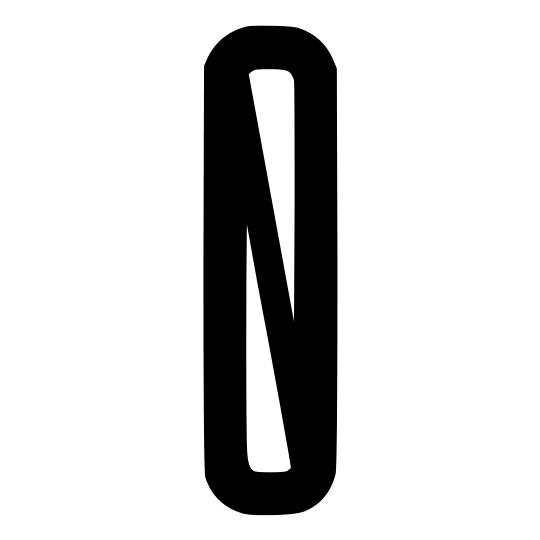
<style>
.page{position:relative;width:540px;height:540px;background:#ffffff}
.page>*{position:absolute;margin:0}
.t1{font:629.2px "DyoblogFont-Regular";letter-spacing:0.04em;color:#000000}
</style>
<div class="page">
<p class="t1" style="left:203px;top:25px;width:135px;height:491px">0</p>
</div>
